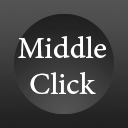
<style>
.page{position:relative;width:128px;height:128px}
.page>*{position:absolute;margin:0}
.t1{font:30px "AdobeHebrew-Regular";color:#ffffff}
</style>
<div class="page">
<p class="t1" style="left:18px;top:36px;width:88px;height:58px;text-align:center">Middle<br>Click</p>
</div>
